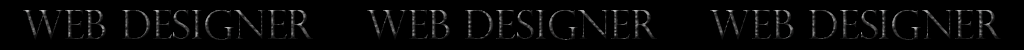
<style>
.page{position:relative;width:1024px;height:50px;background:#000000}
.page>*{position:absolute;margin:0}
.t1{font:40px "PerpetuaTitlingMT-Light"}
</style>
<div class="page">
<p class="t1" style="left:23px;top:10px;width:978px;height:30px">Web Designer    web designer    web designer</p>
</div>
